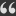
<style>
.page{position:relative;width:16px;height:16px;background:#333333}
.page>*{position:absolute;margin:0}
.t1{font:36px "TimesNewRomanPS-BoldMT";color:#dddddd}
</style>
<div class="page">
<p class="t1" style="left:0px;top:1px;width:16px;height:13px">“</p>
</div>
